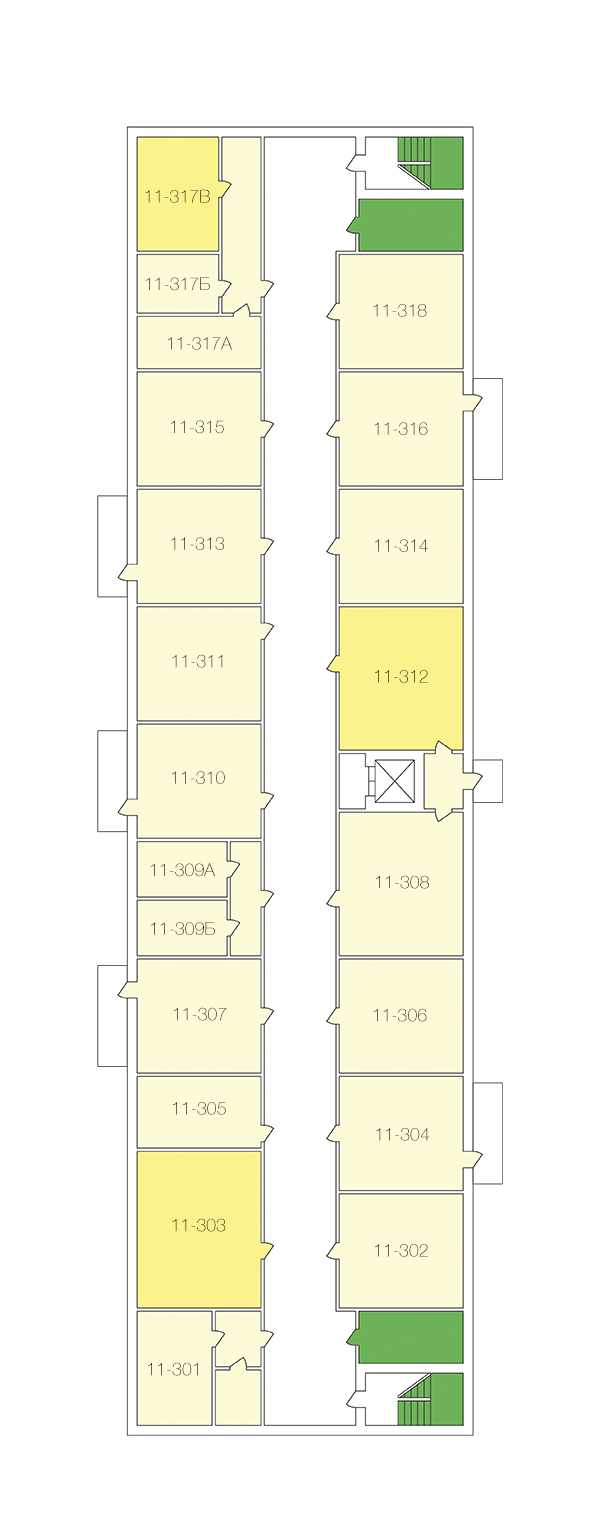
<style>
.page{position:relative;width:600px;height:1524px;background:#ffffff}
.page>*{position:absolute;margin:0}
.t1{font:17.8px "HelveticaNeueCyr-Thin"}
.t2{font:17.8px "HelveticaNeueCyr-Thin";color:#000000}
</style>
<div class="page">
<p class="t1" style="left:145px;top:189px;width:65px;height:14px">11-317В</p>
<p class="t1" style="left:145px;top:277px;width:65px;height:14px">11-317Б</p>
<p class="t1" style="left:373px;top:304px;width:54px;height:13px">11-318</p>
<p class="t1" style="left:167px;top:336px;width:65px;height:14px">11-317А</p>
<p class="t1" style="left:171px;top:420px;width:53px;height:14px">11-315</p>
<p class="t1" style="left:374px;top:422px;width:54px;height:13px">11-316</p>
<p class="t2" style="left:171px;top:537px;width:53px;height:13px">11-313</p>
<p class="t2" style="left:375px;top:539px;width:53px;height:13px">11-314</p>
<p class="t1" style="left:172px;top:654px;width:51px;height:14px">11-311</p>
<p class="t1" style="left:375px;top:670px;width:53px;height:13px">11-312</p>
<p class="t1" style="left:171px;top:771px;width:54px;height:13px">11-310</p>
<p class="t1" style="left:150px;top:863px;width:65px;height:14px">11-309А</p>
<p class="t1" style="left:376px;top:875px;width:53px;height:14px">11-308</p>
<p class="t2" style="left:151px;top:922px;width:64px;height:13px">11-309Б</p>
<p class="t1" style="left:173px;top:1007px;width:54px;height:14px">11-307</p>
<p class="t1" style="left:373px;top:1008px;width:54px;height:14px">11-306</p>
<p class="t1" style="left:173px;top:1102px;width:53px;height:13px">11-305</p>
<p class="t1" style="left:376px;top:1128px;width:54px;height:13px">11-304</p>
<p class="t1" style="left:172px;top:1218px;width:54px;height:14px">11-303</p>
<p class="t1" style="left:375px;top:1244px;width:53px;height:13px">11-302</p>
<p class="t1" style="left:148px;top:1362px;width:50px;height:14px">11-301</p>
</div>
